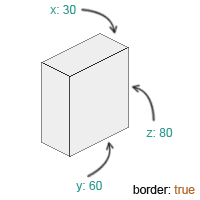
<style>
.page{position:relative;width:200px;height:200px;background:#ffffff}
.page>*{position:absolute;margin:0}
.t1{font:12px "ArialMT";color:#329b90}
.t2{font:12px "ArialMT";color:#131313}
.t3{font:12px "ArialMT";color:#b76427}
</style>
<div class="page">
<p class="t1" style="left:50px;top:5px;width:26px;height:9px">x: 30</p>
<p class="t1" style="left:146px;top:128px;width:27px;height:9px">z: 80</p>
<p class="t1" style="left:76px;top:181px;width:26px;height:11px">y: 60</p>
<p class="t2" style="left:133px;top:185px;width:62px;height:9px">border: <span class="t3">true</span></p>
</div>
